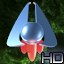
<style>
.page{position:relative;width:64px;height:64px}
.page>*{position:absolute;margin:0}
.t1{font:14px "Astrolyte"}
</style>
<div class="page">
<p class="t1" style="left:42px;top:52px;width:21px;height:11px">HD</p>
</div>
